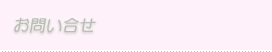
<style>
.page{position:relative;width:272px;height:52px;background:#fef1f9}
.page>*{position:absolute;margin:0}
.t1{font:16px "YentiEGP-Medium-SJIS";color:#bcbcbc;font-weight:bold;font-style:italic}
</style>
<div class="page">
<p class="t1" style="left:14px;top:17px;width:82px;height:16px">お問い合せ</p>
</div>
